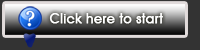
<style>
.page{position:relative;width:200px;height:50px;background:#333333}
.page>*{position:absolute;margin:0}
.t1{font:13.4px "AvantGardeITCbyBT-Medium";color:#ffffff;font-weight:bold}
</style>
<div class="page">
<p class="t1" style="left:49px;top:13px;width:114px;height:11px">Click here to start</p>
</div>
